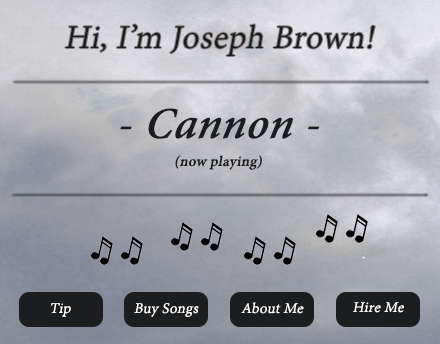
<style>
.page{position:relative;width:440px;height:344px}
.page>*{position:absolute;margin:0}
.t1{font:36px "AdobeDevanagari-Regular";letter-spacing:0.02em;color:#1c1d1e;font-style:italic}
.t2{font:16px/28px "AdobeDevanagari-Bold";letter-spacing:0.02em;color:#1c1d1e;font-style:italic}
.t3{font:48px/28px "AdobeDevanagari-Regular";letter-spacing:0.02em;color:#1c1d1e;font-style:italic}
.t4{font:48px/28px "AdobeDevanagari-BoldItalic";letter-spacing:0.02em;color:#1c1d1e;font-style:italic}
.t5{font:16px "AdobeDevanagari-Regular";letter-spacing:0.02em;color:#ffffff;font-style:italic}
</style>
<div class="page">
<p class="t1" style="left:65px;top:24px;width:310px;height:32px">Hi, I’m Joseph Brown!</p>
<p class="t2" style="left:120px;top:108px;width:200px;height:62px;text-align:center"><span class="t3">- </span><span class="t4">Cannon </span><span class="t3">-<br></span>(now playing)</p>
<p class="t5" style="left:51px;top:303px;width:20px;height:14px">Tip</p>
<p class="t5" style="left:134px;top:303px;width:65px;height:14px">Buy Songs</p>
<p class="t5" style="left:241px;top:302px;width:63px;height:12px">About Me</p>
<p class="t5" style="left:353px;top:302px;width:51px;height:11px">Hire Me</p>
</div>
